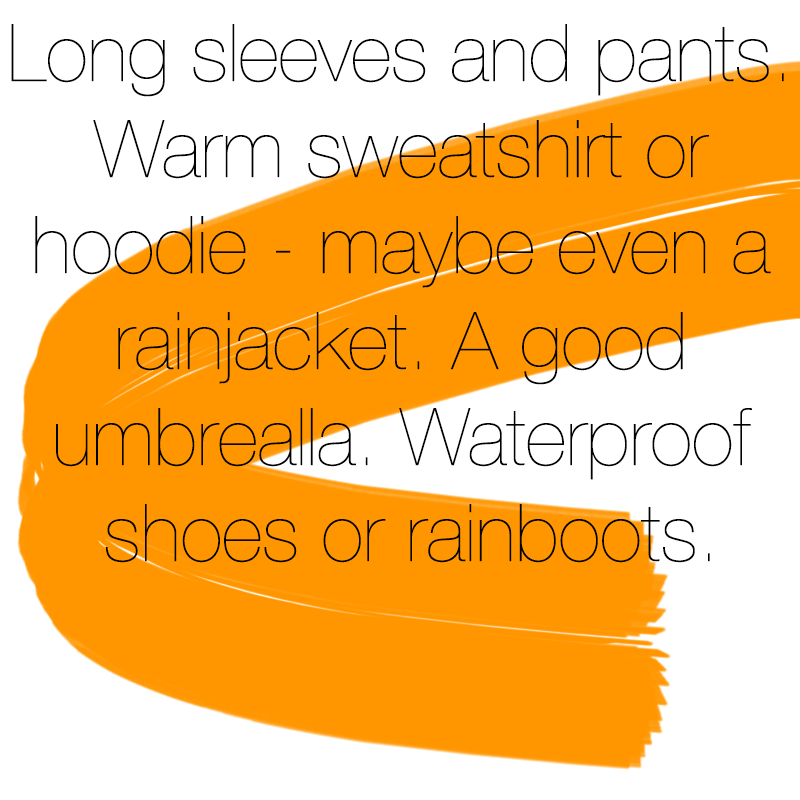
<style>
.page{position:relative;width:800px;height:800px;background:#ffffff}
.page>*{position:absolute;margin:0}
.t1{font:80px "HelveticaNeue-UltraLight";color:#000000}
</style>
<div class="page">
<p class="t1" style="left:11px;top:24px;width:773px;height:539px;text-align:center">Long sleeves and pants. <br>Warm sweatshirt or <br>hoodie - maybe even a <br>rainjacket. A good <br>umbrealla. Waterproof <br>shoes or rainboots.</p>
</div>
